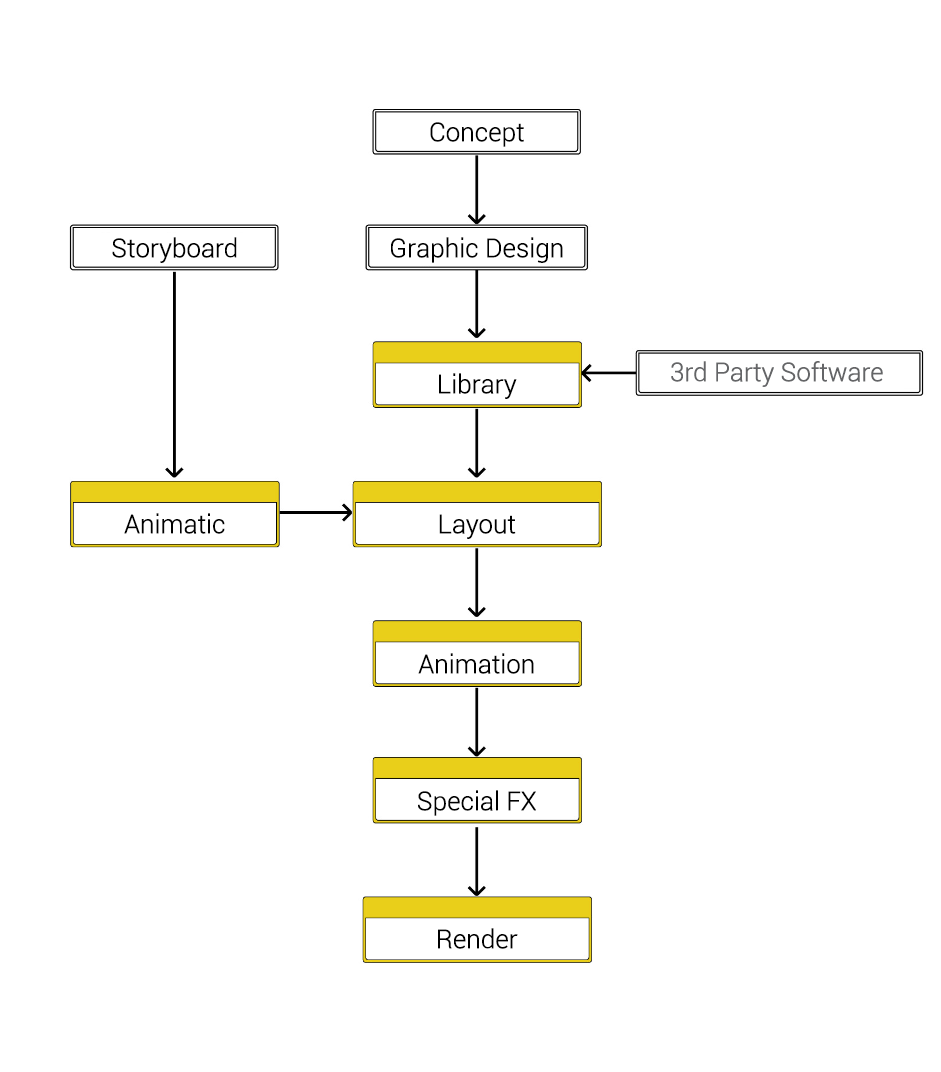
<style>
.page{position:relative;width:941px;height:1072px;background:#ffffff}
.page>*{position:absolute;margin:0}
.t1{font:26px "Roboto-Light";letter-spacing:-0.025em;color:#000000;font-weight:bold}
.t2{font:26px "Roboto-Light";letter-spacing:-0.025em;color:#646567;font-weight:bold}
</style>
<div class="page">
<p class="t1" style="left:430px;top:122px;width:94px;height:25px">Concept</p>
<p class="t1" style="left:112px;top:237px;width:125px;height:26px">Storyboard</p>
<p class="t1" style="left:391px;top:237px;width:172px;height:26px">Graphic Design</p>
<p class="t2" style="left:671px;top:361px;width:212px;height:26px">3rd Party Software</p>
<p class="t1" style="left:439px;top:373px;width:78px;height:26px">Library</p>
<p class="t1" style="left:124px;top:513px;width:101px;height:21px">Animatic</p>
<p class="t1" style="left:439px;top:514px;width:77px;height:25px">Layout</p>
<p class="t1" style="left:418px;top:653px;width:116px;height:21px">Animation</p>
<p class="t1" style="left:418px;top:790px;width:118px;height:26px">Special FX</p>
<p class="t1" style="left:438px;top:928px;width:80px;height:21px">Render</p>
</div>
